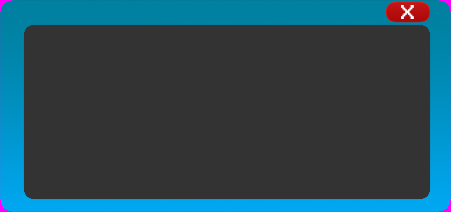
<style>
.page{position:relative;width:451px;height:212px;background:#333333}
.page>*{position:absolute;margin:0}
.t1{font:18px "System";color:#ffffff}
</style>
<div class="page">
<p class="t1" style="left:401px;top:5px;width:13px;height:14px">X</p>
</div>
